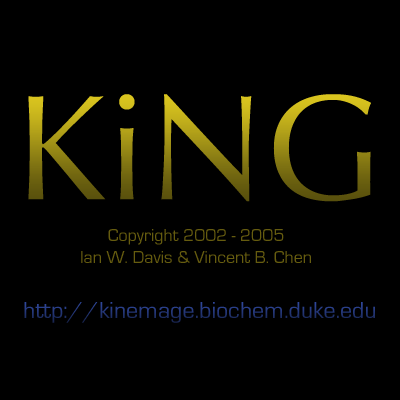
<style>
.page{position:relative;width:400px;height:400px;background:#000000}
.page>*{position:absolute;margin:0}
.t1{font:150px "Optima-Regular"}
.t2{font:18px "EurostileRegular";color:#665c0f}
.t3{font:24px "EurostileRegular";color:#25387a}
</style>
<div class="page">
<p class="t1" style="left:28px;top:94px;width:343px;height:108px">KiNG</p>
<p class="t2" style="left:81px;top:229px;width:230px;height:34px;text-align:center">Copyright 2002 - 2005<br>Ian W. Davis &amp; Vincent B. Chen</p>
<p class="t3" style="left:24px;top:302px;width:351px;height:21px">http://kinemage.biochem.duke.edu</p>
</div>
